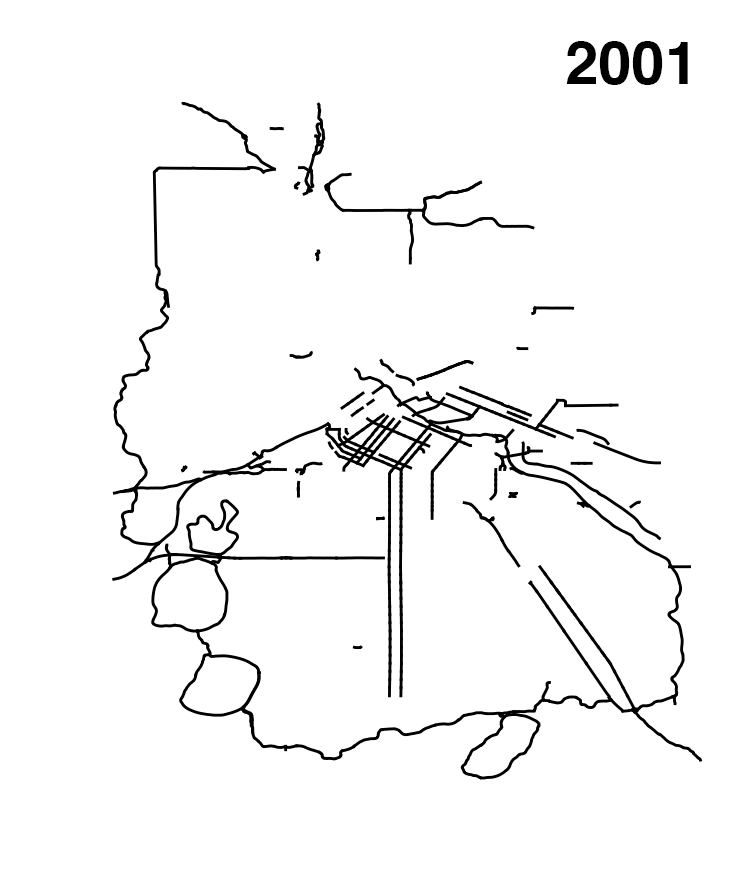
<style>
.page{position:relative;width:750px;height:888px;background:#ffffff}
.page>*{position:absolute;margin:0}
.t1{font:60px "Helvetica-Bold";color:#000000}
</style>
<div class="page">
<p class="t1" style="left:566px;top:41px;width:122px;height:44px">2001</p>
</div>
